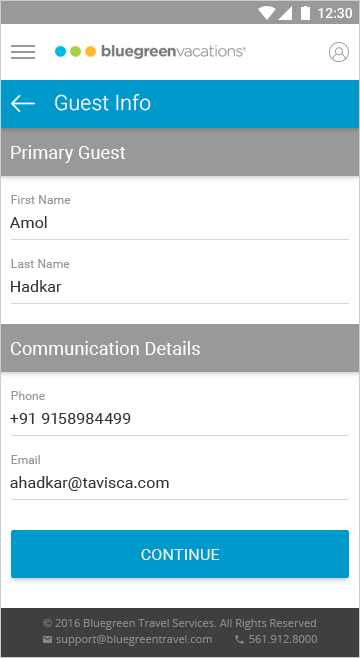
<style>
.page{position:relative;width:360px;height:658px;background:#ffffff}
.page>*{position:absolute;margin:0}
.t1{font:21px "Roboto-Light";letter-spacing:0.01em;color:#ffffff}
.t2{font:18px "Roboto-Regular";letter-spacing:0.01em;color:#ffffff}
.t3{font:12px "Roboto-Regular";letter-spacing:0.01em;color:#999999}
.t4{font:16px "Roboto-Regular";letter-spacing:0.01em;color:#333333}
.t5{font:16px "Roboto-Regular";letter-spacing:0.01em;color:#ffffff;text-transform:uppercase}
</style>
<div class="page">
<p class="t1" style="left:55px;top:93px;width:96px;height:18px">Guest Info</p>
<p class="t2" style="left:11px;top:145px;width:115px;height:18px">Primary Guest</p>
<p class="t3" style="left:11px;top:195px;width:60px;height:9px">First Name</p>
<p class="t4" style="left:10px;top:216px;width:37px;height:12px">Amol</p>
<p class="t3" style="left:11px;top:259px;width:59px;height:9px">Last Name</p>
<p class="t4" style="left:11px;top:280px;width:51px;height:12px">Hadkar</p>
<p class="t2" style="left:10px;top:341px;width:190px;height:14px">Communication Details</p>
<p class="t3" style="left:11px;top:391px;width:34px;height:9px">Phone</p>
<p class="t4" style="left:10px;top:413px;width:121px;height:11px">+91 9158984499</p>
<p class="t3" style="left:11px;top:455px;width:29px;height:9px">Email</p>
<p class="t4" style="left:10px;top:476px;width:159px;height:15px">ahadkar@tavisca.com</p>
<p class="t5" style="left:141px;top:549px;width:79px;height:11px;opacity:0.87">CONTINUE</p>
</div>
